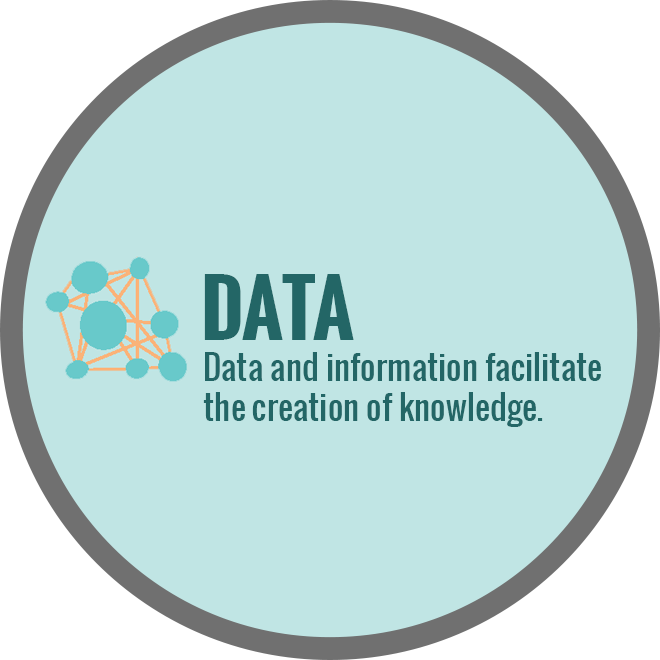
<style>
.page{position:relative;width:660px;height:660px;background:#c0e5e4}
.page>*{position:absolute;margin:0}
.t1{font:75px "Oswald-Bold";color:#236666}
.t2{font:33.3px "Oswald-Regular";color:#236666}
</style>
<div class="page">
<p class="t1" style="left:204px;top:274px;width:150px;height:66px">DATA</p>
<p class="t2" style="left:203px;top:352px;width:398px;height:75px">Data and information facilitate<br>the creation of knowledge.</p>
</div>
